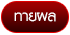
<style>
.page{position:relative;width:70px;height:35px}
.page>*{position:absolute;margin:0}
.t1{font:21.1px "PSLxKittithada-Bold";color:#fffefe}
</style>
<div class="page">
<p class="t1" style="left:14px;top:12px;width:42px;height:10px">ทายผล</p>
</div>
